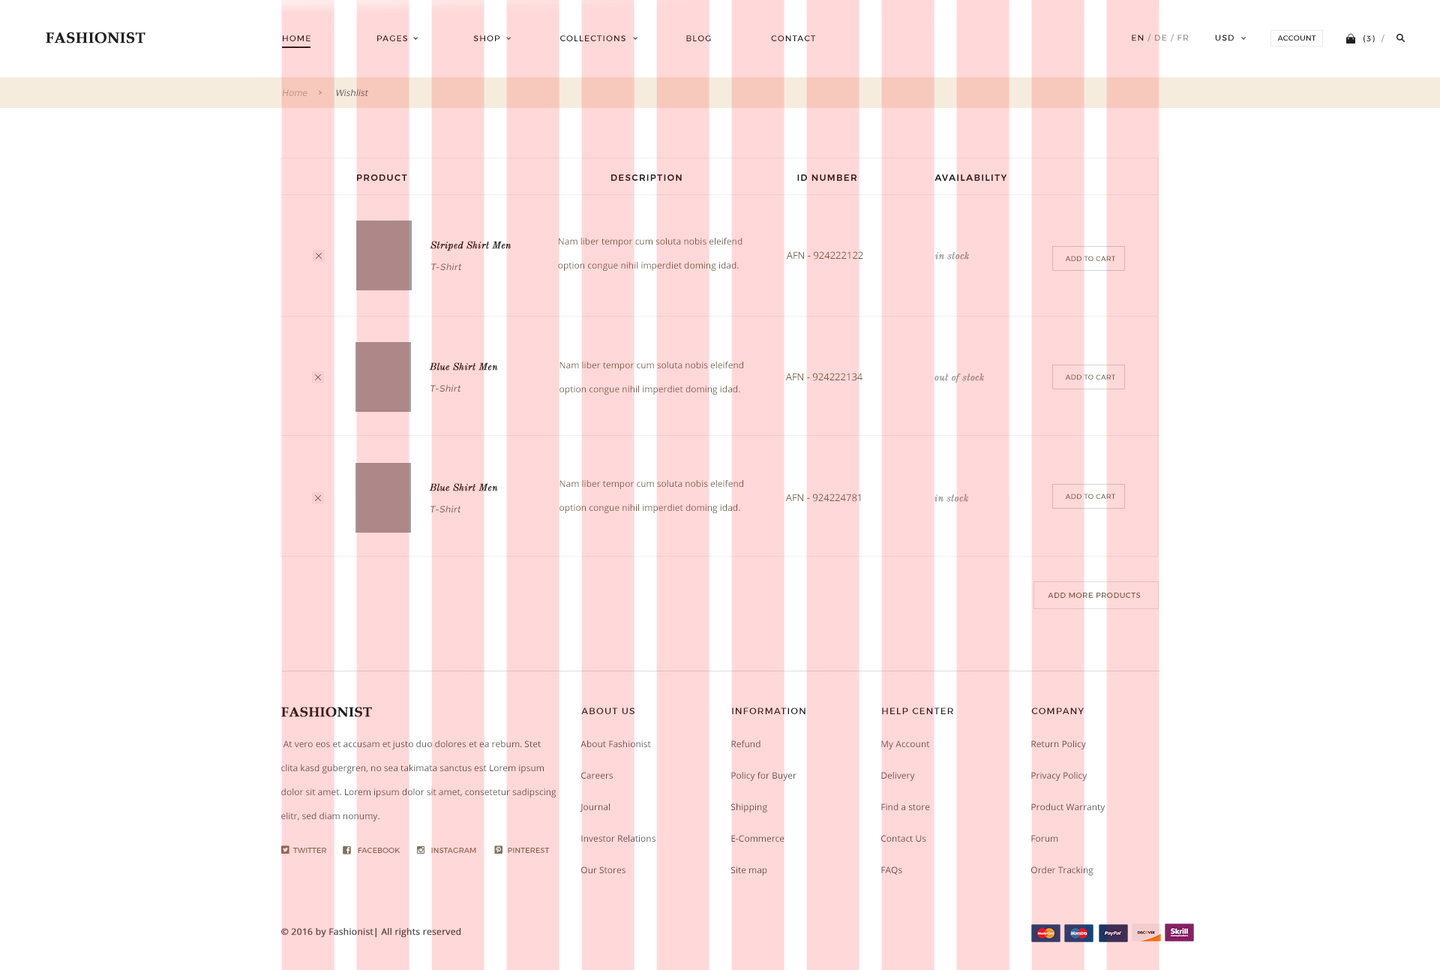
<style>
.page{position:relative;width:1440px;height:970px;background:#ffffff}
.page>*{position:absolute;margin:0}
.t1{font:15px "BookAntiqua-Bold";color:#202020;text-transform:uppercase;font-weight:bold}
.t2{font:8.2px "Montserrat-Regular";letter-spacing:0.1em}
.t3{font:8.2px "Montserrat-Regular";letter-spacing:0.1em;color:#939393}
.t4{font:8.2px "Montserrat-Regular";letter-spacing:0.1em;color:#202020}
.t5{font:7.5px "Montserrat-Regular";letter-spacing:0.01em;color:#202020}
.t6{font:9px "OpenSans";font-style:italic}
.t7{font:9px "Montserrat-SemiBold";letter-spacing:0.1em;color:#411b1b;text-transform:uppercase}
.t8{font:9.8px "OldStandardTT-Italic";color:#411b1b;font-weight:bold}
.t9{font:9px/24px "OpenSans";color:#736550}
.t10{font:9.8px "OpenSans";color:#736550}
.t11{font:9.8px "OldStandardTT-Italic";color:#999999;font-weight:bold}
.t12{font:6.8px "Montserrat-Regular";letter-spacing:0.05em;color:#736550;text-transform:uppercase}
.t13{font:9px "Raleway-Medium";letter-spacing:0.05em;color:#885644;font-style:italic}
.t14{font:7.5px "Montserrat-Regular";letter-spacing:0.05em;color:#736550}
.t15{font:13.5px "BookAntiqua-Bold";color:#411b1b;text-transform:uppercase;font-weight:bold}
.t16{font:9px "Montserrat-Regular";letter-spacing:0.1em;color:#411b1b;text-transform:uppercase}
.t17{font:9px/24px "OpenSans";color:#6f4949}
.t18{font:9px/31.5px "OpenSans";color:#6f4949}
.t19{font:7.5px "Montserrat-Regular";color:#80725e;text-transform:uppercase}
.t20{font:9px "OpenSans";color:#6f4949;font-weight:bold}
</style>
<div class="page">
<p class="t1" style="left:46px;top:32px;width:100px;height:12px">Fashionist</p>
<p class="t2" style="left:283px;top:35px;width:533px;height:6px">HOME                      PAGES                      SHOP                    COLLECTIONS                    BLOG                    CONTACT</p>
<p class="t3" style="left:1132px;top:34px;width:57px;height:8px"><span class="t4">EN </span>/ DE / FR</p>
<p class="t4" style="left:1215px;top:34px;width:19px;height:7px">USD</p>
<p class="t5" style="left:1277px;top:35px;width:39px;height:6px">ACCOUNT</p>
<p class="t4" style="left:1364px;top:34px;width:20px;height:9px">(3)  /</p>
<p class="t6" style="left:282px;top:89px;width:86px;height:7px">Home            Wishlist</p>
<p class="t7" style="left:357px;top:174px;width:650px;height:7px">product                                                                  DESCRIPTION                                     ID NUMBER                         aVAILABILITY</p>
<p class="t8" style="left:430px;top:241px;width:81px;height:10px">Striped Shirt Men</p>
<p class="t9" style="left:558px;top:238px;width:184px;height:33px">Nam liber tempor cum soluta nobis eleifend <br>option congue nihil imperdiet doming idad.</p>
<p class="t10" style="left:786px;top:251px;width:77px;height:9px">AFN - 924222122</p>
<p class="t11" style="left:935px;top:251px;width:34px;height:9px">in stock</p>
<p class="t12" style="left:1065px;top:256px;width:50px;height:5px">add to cart</p>
<p class="t13" style="left:431px;top:263px;width:31px;height:7px">T-Shirt</p>
<p class="t8" style="left:429px;top:362px;width:69px;height:8px">Blue Shirt Men</p>
<p class="t9" style="left:560px;top:362px;width:183px;height:32px">Nam liber tempor cum soluta nobis eleifend <br>option congue nihil imperdiet doming idad.</p>
<p class="t10" style="left:785px;top:373px;width:77px;height:8px">AFN - 924222134</p>
<p class="t11" style="left:934px;top:373px;width:50px;height:10px">out of stock</p>
<p class="t12" style="left:1065px;top:374px;width:50px;height:6px">add to cart</p>
<p class="t13" style="left:430px;top:385px;width:31px;height:7px">T-Shirt</p>
<p class="t8" style="left:429px;top:483px;width:69px;height:8px">Blue Shirt Men</p>
<p class="t9" style="left:560px;top:480px;width:183px;height:33px">Nam liber tempor cum soluta nobis eleifend <br>option congue nihil imperdiet doming idad.</p>
<p class="t10" style="left:785px;top:494px;width:76px;height:8px">AFN - 924224781</p>
<p class="t11" style="left:934px;top:494px;width:34px;height:8px">in stock</p>
<p class="t12" style="left:1065px;top:494px;width:50px;height:5px">add to cart</p>
<p class="t13" style="left:430px;top:506px;width:31px;height:6px">T-Shirt</p>
<p class="t14" style="left:1048px;top:592px;width:93px;height:6px">ADD MORE PRODUCTS</p>
<p class="t15" style="left:281px;top:706px;width:91px;height:11px">Fashionist</p>
<p class="t16" style="left:581px;top:707px;width:53px;height:7px">about us</p>
<p class="t16" style="left:732px;top:707px;width:74px;height:7px">INFORMATION</p>
<p class="t16" style="left:882px;top:707px;width:71px;height:7px">help center</p>
<p class="t16" style="left:1031px;top:707px;width:53px;height:7px">Company</p>
<p class="t17" style="left:281px;top:740px;width:275px;height:81px">At vero eos et accusam et justo duo dolores et ea rebum. Stet clita kasd gubergren, no sea takimata sanctus est Lorem ipsum dolor sit amet. Lorem ipsum dolor sit amet, consetetur sadipscing elitr, sed diam nonumy.</p>
<p class="t18" style="left:580px;top:740px;width:76px;height:133px">About Fashionist <br>Careers<br>Journal<br>Investor Relations<br>Our Stores</p>
<p class="t18" style="left:730px;top:740px;width:66px;height:135px">Refund<br>Policy for Buyer<br>Shipping<br>E-Commerce<br>Site map</p>
<p class="t18" style="left:881px;top:740px;width:49px;height:134px">My Account<br>Delivery<br>Find a store<br>Contact Us<br>FAQs</p>
<p class="t18" style="left:1031px;top:740px;width:75px;height:135px">Return Policy<br>Privacy Policy<br>Product Warranty<br>Forum<br>Order Tracking</p>
<p class="t19" style="left:293px;top:848px;width:257px;height:5px">TWITTER                FACEBOOK                INSTAGRAM                PINTEREST</p>
<p class="t20" style="left:281px;top:928px;width:180px;height:10px">© 2016 by Fashionist| All rights reserved</p>
</div>
